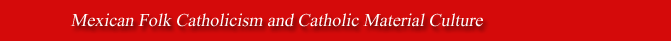
<style>
.page{position:relative;width:671px;height:41px;background:#d50a0a}
.page>*{position:absolute;margin:0}
.t1{font:18px "TimesNewRomanPSMT";color:#fdfcfb;font-style:italic}
</style>
<div class="page">
<p class="t1" style="left:70px;top:13px;width:413px;height:14px">Mexican Folk Catholicism and Catholic Material Culture</p>
</div>
